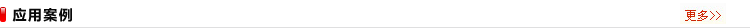
<style>
.page{position:relative;width:750px;height:28px;background:#ffffff}
.page>*{position:absolute;margin:0}
.t1{font:14px "MicrosoftYaHei";letter-spacing:0.1em;color:#080808;text-transform:uppercase}
</style>
<div class="page">
<p class="t1" style="left:12px;top:8px;width:60px;height:14px">应用案例</p>
</div>
